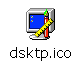
<style>
.page{position:relative;width:80px;height:80px;background:#ffffff}
.page>*{position:absolute;margin:0}
.t1{font:14px "MSReferenceSansSerif";color:#000000}
</style>
<div class="page">
<p class="t1" style="left:10px;top:47px;width:61px;height:14px">dsktp.ico</p>
</div>
